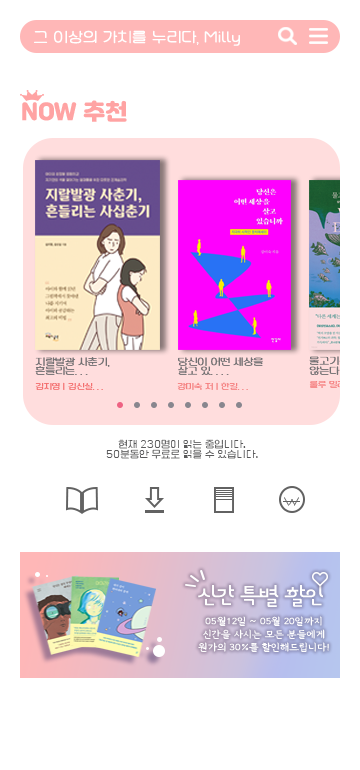
<style>
.page{position:relative;width:360px;height:770px;background:#ffffff}
.page>*{position:absolute;margin:0}
.t1{font:18px "HUReply130";color:#ffffff}
.t2{font:22.2px "JalnanOTF";color:#ffa3a3}
.t3{font:12px/9.3px "HUReply130";color:#727173}
.t4{font:10px "HUReply130";color:#f46f6f}
.t5{font:10px "HUReply130";color:#f58181}
.t6{font:10px "HUReply130";color:#ffffff}
.t7{font:10px/10px "Cafe24Ssurroundair";color:#5a5a5b}
.t8{font:19.1px "YeongdoOTF-Rg";color:#ffffff;scale:1.11 1}
.t9{font:10.6px "GangwonEduAllLight";color:#ffffff;scale:1.11 1}
</style>
<div class="page">
<p class="t1" style="left:34px;top:30px;width:206px;height:16px">그 이상의 가치를 누리다, Milly</p>
<p class="t2" style="left:22px;top:100px;width:105px;height:22px">NOW 추천</p>
<p class="t3" style="left:35px;top:357px;width:75px;height:18px">지랄발광 사춘기,<br>흔들리는. . .</p>
<p class="t3" style="left:178px;top:357px;width:85px;height:18px">당신이 어떤 세상을<br>살고 있. . . .</p>
<p class="t4" style="left:35px;top:382px;width:68px;height:8px">김지영 | 김신실. . .</p>
<p class="t5" style="left:177px;top:382px;width:71px;height:8px">강미숙 저 | 한길. . .</p>
<p class="t6" style="left:309px;top:381px;width:48px;height:7px">룰루 밀러 저</p>
<p class="t7" style="left:106px;top:439px;width:152px;height:20px;text-align:center">현재 230명이 읽는 중입니다.<br>50분동안 무료로 읽을 수 있습니다.</p>
<p class="t8" style="left:198px;top:585px;width:125px;height:22px">신간 특별 할인</p>
<p class="t9" style="left:198px;top:616px;width:131px;height:36px;text-align:center">05월12일 ~ 05월 20일까지<br>신간을 사시는 모든 분들에게<br>원가의 30%를 할인해드립니다!</p>
</div>
